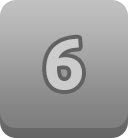
<style>
.page{position:relative;width:128px;height:138px}
.page>*{position:absolute;margin:0}
.t1{font:72px "Ubuntu-Bold";color:#cccccc}
</style>
<div class="page">
<p class="t1" style="left:46px;top:38px;width:36px;height:52px">6</p>
</div>
